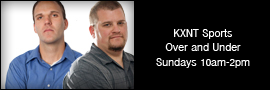
<style>
.page{position:relative;width:270px;height:90px;background:#000000}
.page>*{position:absolute;margin:0}
.t1{font:12px "InaiMathi";color:#ffffff}
</style>
<div class="page">
<p class="t1" style="left:156px;top:29px;width:94px;height:39px;text-align:center">KXNT Sports<br>Over and Under<br>Sundays 10am-2pm</p>
</div>
